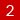
<style>
.page{position:relative;width:20px;height:20px;background:#cc0000}
.page>*{position:absolute;margin:0}
.t1{font:15px "ArialMT";color:#ffffff}
</style>
<div class="page">
<p class="t1" style="left:6px;top:5px;width:8px;height:11px">2</p>
</div>
